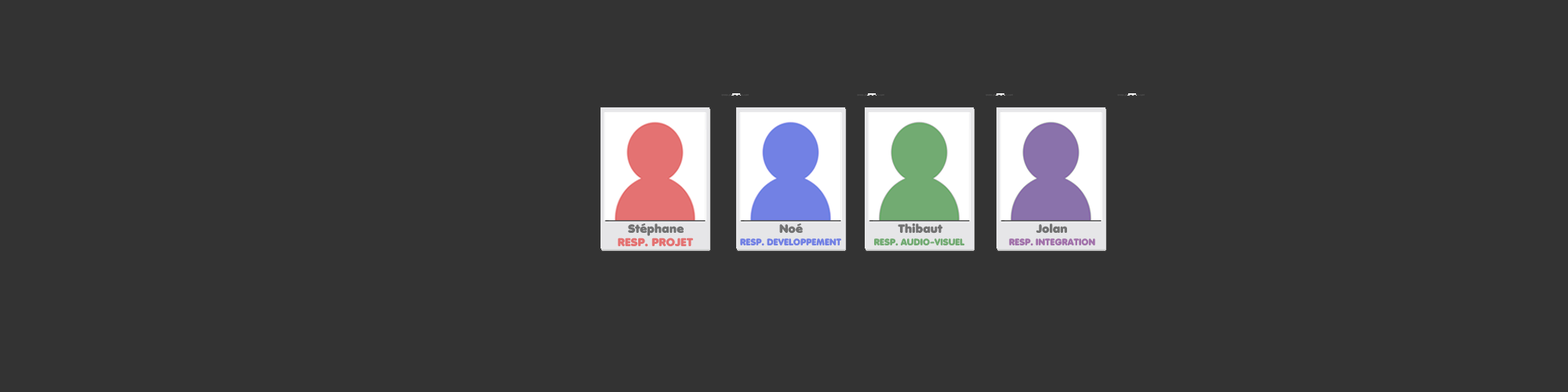
<style>
.page{position:relative;width:1568px;height:392px;background:#333333}
.page>*{position:absolute;margin:0}
.t1{font:11.8px "Debussy";color:#727272}
.t2{font:11.2px "Debussy";color:#e47272;text-transform:uppercase}
.t3{font:9.4px "Debussy";color:#7281e4;text-transform:uppercase;scale:0.94 1}
.t4{font:9.4px "Debussy";color:#72ab72;text-transform:uppercase;scale:0.94 1}
.t5{font:9.4px "Debussy";color:#a272ab;text-transform:uppercase;scale:0.94 1}
</style>
<div class="page">
<p class="t1" style="left:628px;top:223px;width:56px;height:13px">Stéphane</p>
<p class="t1" style="left:779px;top:223px;width:24px;height:11px">Noé</p>
<p class="t1" style="left:898px;top:223px;width:45px;height:11px">Thibaut</p>
<p class="t1" style="left:1036px;top:223px;width:31px;height:11px">Jolan</p>
<p class="t2" style="left:618px;top:238px;width:75px;height:9px">Resp. Projet</p>
<p class="t3" style="left:740px;top:238px;width:101px;height:8px">resp. developpement</p>
<p class="t4" style="left:874px;top:238px;width:91px;height:8px">resp. audio-visuel</p>
<p class="t5" style="left:1009px;top:238px;width:86px;height:8px">resp. integration</p>
</div>
